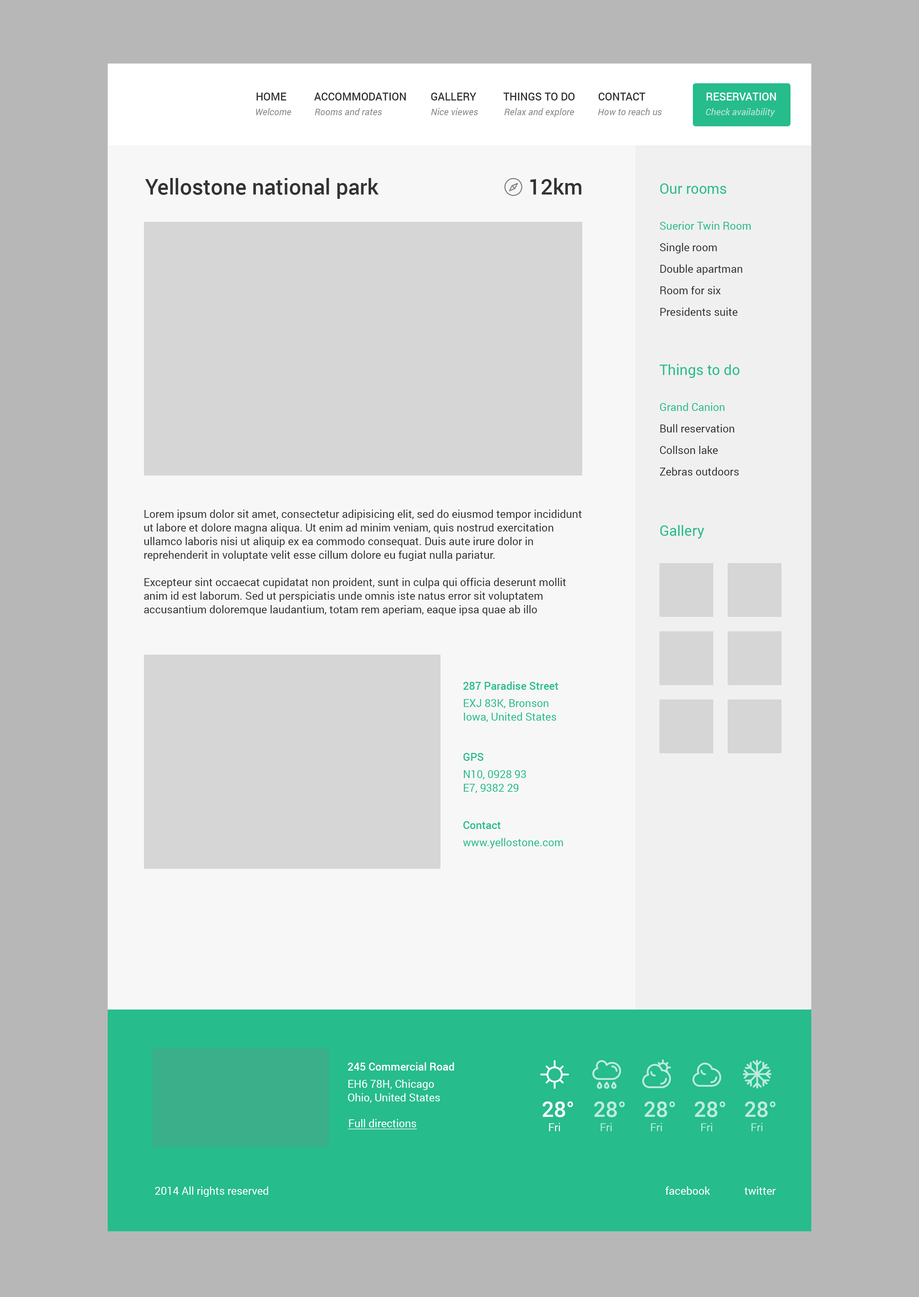
<style>
.page{position:relative;width:919px;height:1297px;background:#b7b7b7}
.page>*{position:absolute;margin:0}
.t1{font:10.8px "Roboto-Medium";color:#333333;text-transform:uppercase}
.t2{font:10.8px "Roboto-Medium";color:#fffefe;text-transform:uppercase}
.t3{font:9.3px "Roboto-Italic";color:#888888}
.t4{font:9.3px "Roboto-Italic";color:#bde6d6}
.t5{font:21.5px "Roboto-Medium";color:#333333}
.t6{font:14.4px "Roboto-Regular";color:#26bc8c}
.t7{font:10.8px/21.5px "Roboto-Regular";color:#333333}
.t8{font:10.8px/21.5px "Roboto-Regular";color:#26bc8c}
.t9{font:10.8px/13.6px "Roboto-Regular";color:#333333}
.t10{font:10.8px/13.6px "Roboto-Medium";color:#26bc8c}
.t11{font:10.8px/17.2px "Roboto-Regular";color:#26bc8c}
.t12{font:10.8px/13.6px "Roboto-Regular";color:#26bc8c}
.t13{font:10.8px/13.6px "Roboto-Medium";color:#ffffff}
.t14{font:10.8px/17.2px "Roboto-Regular";color:#ffffff}
.t15{font:10.8px/13.6px "Roboto-Regular";color:#ffffff}
.t16{font:21.5px "Roboto-Medium";color:#ffffff}
.t17{font:21.5px "Roboto-Medium";color:#beebdd}
.t18{font:10.8px "Roboto-Regular";color:#ffffff;text-decoration:underline}
.t19{font:10.8px "Roboto-Regular";color:#ffffff}
.t20{font:10.8px "Roboto-Regular";color:#beebdd}
</style>
<div class="page">
<p class="t1" style="left:256px;top:93px;width:30px;height:8px">Home</p>
<p class="t1" style="left:314px;top:93px;width:92px;height:8px">Accommodation</p>
<p class="t1" style="left:431px;top:93px;width:45px;height:8px">Gallery</p>
<p class="t1" style="left:503px;top:93px;width:72px;height:8px">Things to do</p>
<p class="t1" style="left:598px;top:93px;width:47px;height:8px">Contact</p>
<p class="t2" style="left:707px;top:93px;width:69px;height:8px">Reservation</p>
<p class="t3" style="left:256px;top:108px;width:35px;height:7px">Welcome</p>
<p class="t3" style="left:315px;top:108px;width:67px;height:7px">Rooms and rates</p>
<p class="t3" style="left:431px;top:108px;width:47px;height:7px">Nice viewes</p>
<p class="t3" style="left:504px;top:108px;width:70px;height:9px">Relax and explore</p>
<p class="t3" style="left:598px;top:108px;width:64px;height:7px">How to reach us</p>
<p class="t4" style="left:706px;top:108px;width:69px;height:9px">Check availability</p>
<p class="t5" style="left:145px;top:178px;width:234px;height:21px">Yellostone national park</p>
<p class="t5" style="left:530px;top:178px;width:52px;height:17px">12km</p>
<p class="t6" style="left:660px;top:183px;width:66px;height:11px">Our rooms</p>
<p class="t7" style="left:660px;top:222px;width:91px;height:94px"><span class="t8">Suerior Twin Room<br></span>Single room<br>Double apartman<br>Room for six<br>Presidents suite</p>
<p class="t6" style="left:659px;top:364px;width:81px;height:14px">Things to do</p>
<p class="t7" style="left:660px;top:403px;width:79px;height:73px"><span class="t8">Grand Canion<br></span>Bull reservation<br>Collson lake<br>Zebras outdoors</p>
<p class="t9" style="left:144px;top:510px;width:438px;height:106px">Lorem ipsum dolor sit amet, consectetur adipisicing elit, sed do eiusmod tempor incididunt ut labore et dolore magna aliqua. Ut enim ad minim veniam, quis nostrud exercitation ullamco laboris nisi ut aliquip ex ea commodo consequat. Duis aute irure dolor in reprehenderit in voluptate velit esse cillum dolore eu fugiat nulla pariatur. <br><br>Excepteur sint occaecat cupidatat non proident, sunt in culpa qui officia deserunt mollit anim id est laborum. Sed ut perspiciatis unde omnis iste natus error sit voluptatem accusantium doloremque laudantium, totam rem aperiam, eaque ipsa quae ab illo inventore veritatis et quasi architecto beatae vitae dicta sunt explicabo. Nemo enim ipsam voluptatem quia voluptas sit aspernatur aut odit aut fugit, sed quia consequuntur magni dolores eos qui ratione voluptatem sequi nesciunt. Neque porro quisquam est, qui dolorem ipsum quia dolor sit amet, consectetur, adipisci velit, sed quia non numquam eius modi tempora incidunt ut labore et dolore magnam aliquam quaerat voluptatem.</p>
<p class="t6" style="left:660px;top:525px;width:44px;height:14px">Gallery</p>
<p class="t10" style="left:463px;top:682px;width:95px;height:40px">287 Paradise Street<br><span class="t11">EXJ 83K, Bronson<br></span><span class="t12">Iowa, United States</span></p>
<p class="t11" style="left:463px;top:753px;width:63px;height:40px"><span class="t10">GPS<br></span>N10, 0928 93<br><span class="t12">E7, 9382 29</span></p>
<p class="t11" style="left:463px;top:821px;width:100px;height:28px"><span class="t10">Contact<br></span>www.yellostone.com</p>
<p class="t13" style="left:348px;top:1063px;width:106px;height:40px">245 Commercial Road<br><span class="t14">EH6 78H, Chicago<br></span><span class="t15">Ohio, United States</span></p>
<p class="t16" style="left:542px;top:1102px;width:31px;height:16px">28°</p>
<p class="t17" style="left:594px;top:1102px;width:31px;height:16px">28°</p>
<p class="t17" style="left:644px;top:1102px;width:31px;height:16px">28°</p>
<p class="t17" style="left:695px;top:1102px;width:31px;height:16px">28°</p>
<p class="t17" style="left:745px;top:1102px;width:31px;height:16px">28°</p>
<p class="t18" style="left:348px;top:1119px;width:69px;height:11px">Full directions</p>
<p class="t19" style="left:549px;top:1123px;width:11px;height:9px">Fri</p>
<p class="t20" style="left:601px;top:1123px;width:11px;height:9px">Fri</p>
<p class="t20" style="left:651px;top:1123px;width:11px;height:9px">Fri</p>
<p class="t20" style="left:701px;top:1123px;width:11px;height:9px">Fri</p>
<p class="t20" style="left:751px;top:1123px;width:12px;height:9px">Fri</p>
<p class="t19" style="left:155px;top:1187px;width:113px;height:10px">2014 All rights reserved</p>
<p class="t19" style="left:665px;top:1187px;width:45px;height:8px">facebook</p>
<p class="t19" style="left:745px;top:1187px;width:31px;height:8px">twitter</p>
</div>
